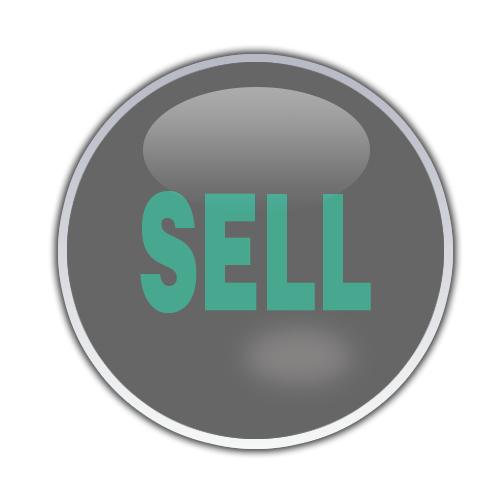
<style>
.page{position:relative;width:500px;height:500px;background:#ffffff}
.page>*{position:absolute;margin:0}
.t1{font:161.5px "Helvetica-Black";color:#47a78f;scale:0.53 1}
</style>
<div class="page">
<p class="t1" style="left:140px;top:191px;width:231px;height:123px">SELL</p>
</div>
